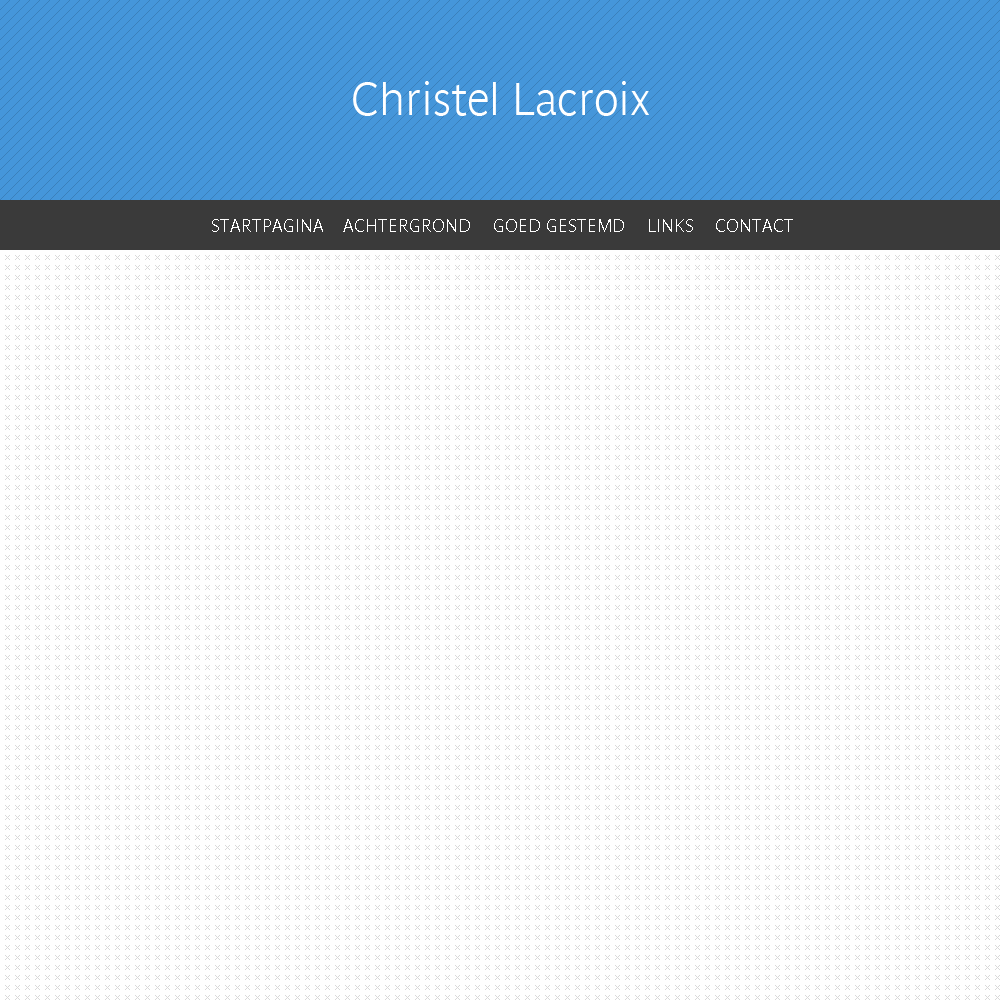
<style>
.page{position:relative;width:1000px;height:1000px;background:#ffffff}
.page>*{position:absolute;margin:0}
.t1{font:45px "ParisineClair-Bold";color:#ffffff}
.t2{font:18px "ParisineClair-Bold";color:#ffffff;text-transform:uppercase}
</style>
<div class="page">
<p class="t1" style="left:353px;top:81px;width:296px;height:35px">Christel Lacroix</p>
<p class="t2" style="left:212px;top:219px;width:111px;height:13px">Startpagina</p>
<p class="t2" style="left:343px;top:219px;width:127px;height:13px">Achtergrond</p>
<p class="t2" style="left:494px;top:219px;width:130px;height:13px">Goed gestemd</p>
<p class="t2" style="left:649px;top:219px;width:44px;height:13px">Links</p>
<p class="t2" style="left:716px;top:219px;width:77px;height:13px">Contact</p>
</div>
